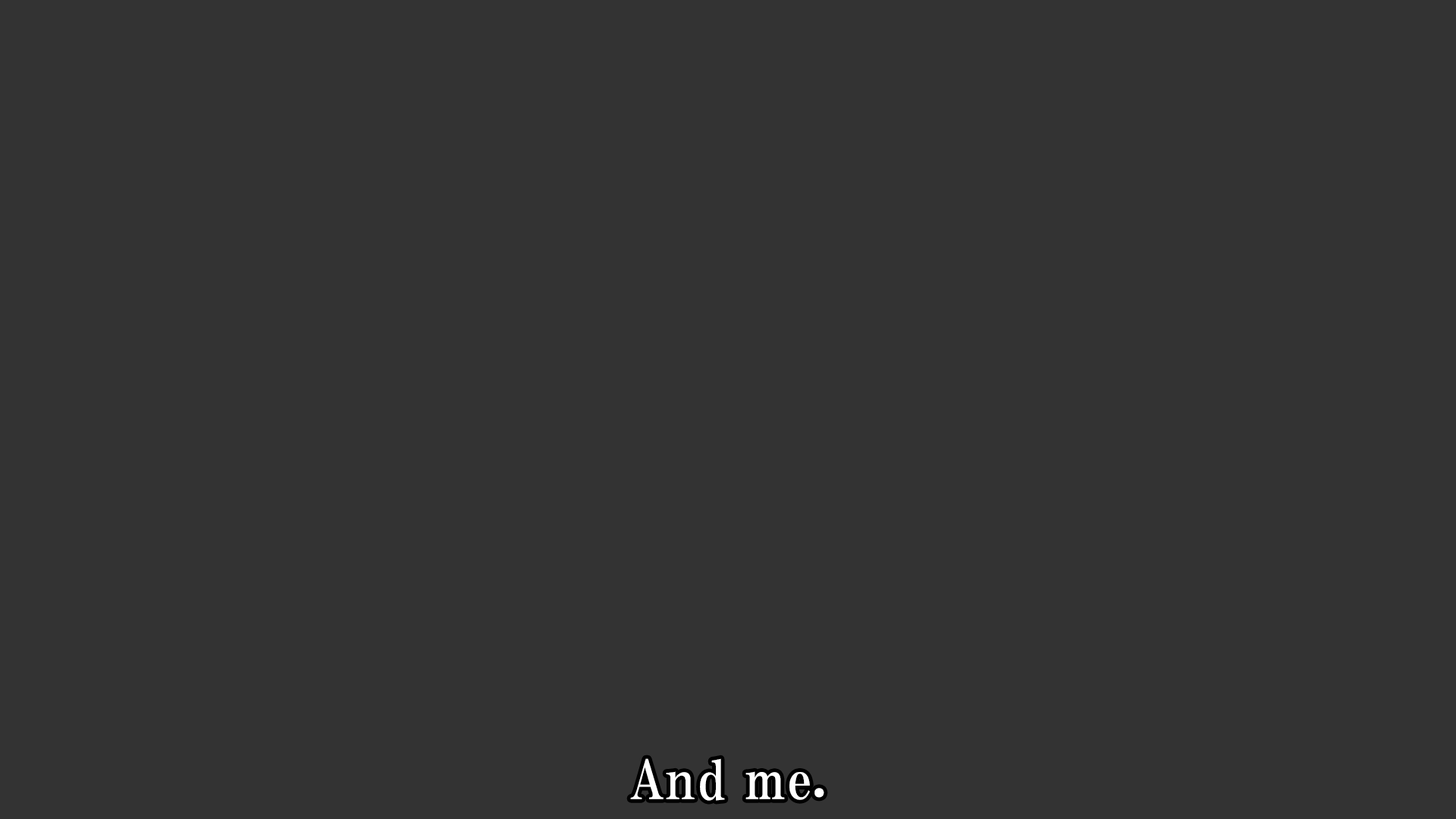
<style>
.page{position:relative;width:1456px;height:819px;background:#333333}
.page>*{position:absolute;margin:0}
.t1{font:53.1px "HGPMinchoE";letter-spacing:0.025em;color:#ffffff}
</style>
<div class="page">
<p class="t1" style="left:630px;top:758px;width:194px;height:43px">And me.</p>
</div>
